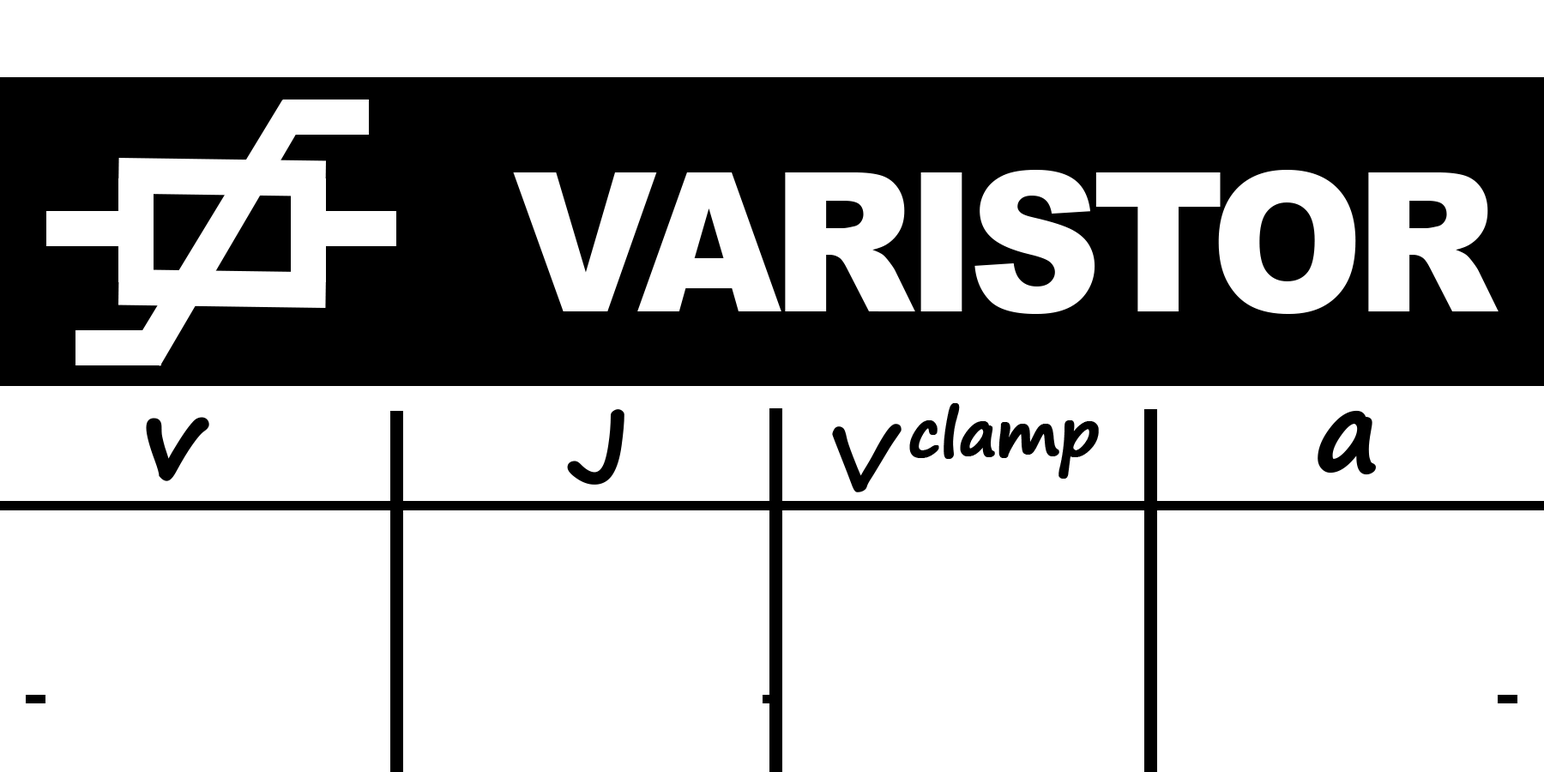
<style>
.page{position:relative;width:1544px;height:772px;background:#ffffff}
.page>*{position:absolute;margin:0}
.t1{font:193.9px "Arial-Black";letter-spacing:-0.05em;color:#ffffff;scale:0.95 1}
.t2{font:99.9px "SegoePrint-Bold";letter-spacing:-0.15em;color:#000000;font-weight:bold}
.t3{font:109px "SegoePrint-Bold";letter-spacing:-0.025em;color:#000000;font-weight:bold}
.t4{font:90.8px "SegoePrint-Bold";letter-spacing:-0.15em;color:#000000;font-weight:bold}
.t5{font:109px "SegoePrint-Bold";letter-spacing:-0.05em;color:#000000;font-weight:bold}
.t6{font:109px "SegoePrint-Bold";letter-spacing:-0.15em;color:#000000;font-weight:bold}
</style>
<div class="page">
<p class="t1" style="left:513px;top:170px;width:986px;height:144px">VARISTOR</p>
<p class="t2" style="left:567px;top:409px;width:58px;height:76px">J</p>
<p class="t3" style="left:832px;top:403px;width:267px;height:89px"><span class="t4">V </span>clamp</p>
<p class="t5" style="left:1318px;top:410px;width:58px;height:65px">a</p>
<p class="t6" style="left:146px;top:417px;width:63px;height:64px">v</p>
</div>
